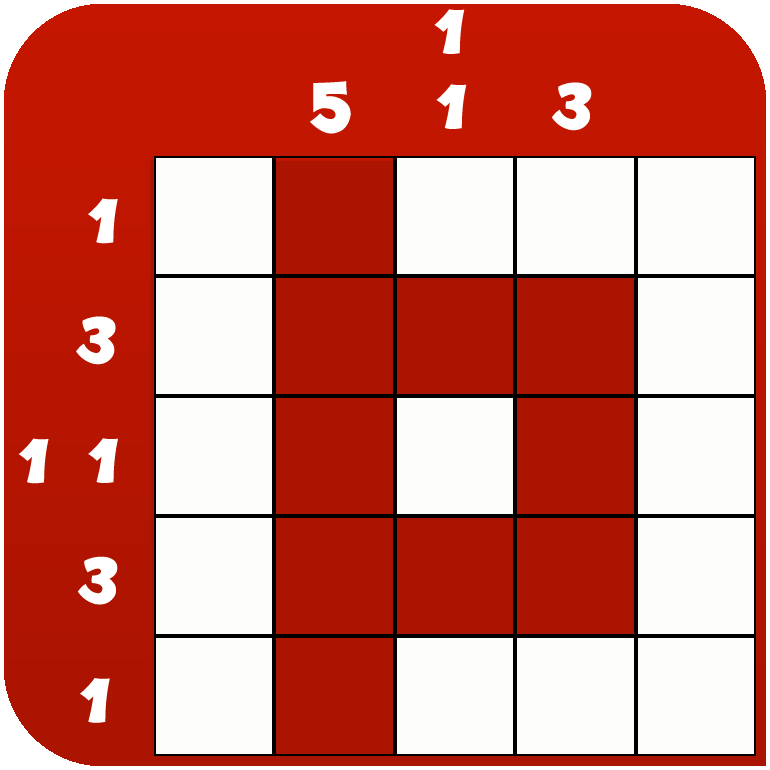
<style>
.page{position:relative;width:770px;height:770px;background:#fdfdfc}
.page>*{position:absolute;margin:0}
.t1{font:36px "KraashBlack";letter-spacing:-0.014em;color:#ffffff}
</style>
<div class="page">
<p class="t1" style="left:434px;top:9px;width:31px;height:45px">1</p>
<p class="t1" style="left:309px;top:81px;width:42px;height:53px">5</p>
<p class="t1" style="left:436px;top:84px;width:31px;height:45px">1</p>
<p class="t1" style="left:551px;top:82px;width:41px;height:49px">3</p>
<p class="t1" style="left:88px;top:198px;width:30px;height:46px">1</p>
<p class="t1" style="left:76px;top:316px;width:40px;height:49px">3</p>
<p class="t1" style="left:18px;top:438px;width:31px;height:46px">1</p>
<p class="t1" style="left:88px;top:438px;width:30px;height:45px">1</p>
<p class="t1" style="left:77px;top:556px;width:41px;height:49px">3</p>
<p class="t1" style="left:80px;top:678px;width:30px;height:45px">1</p>
</div>
